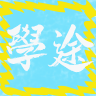
<style>
.page{position:relative;width:96px;height:96px}
.page>*{position:absolute;margin:0}
.t1{font:51.6px "HBJGTPFT--GB1-0";letter-spacing:0.06em;color:#f5f8f9}
.t2{font:52.7px "HBJGTPFT--GB1-0";letter-spacing:0.06em;color:#f6f8f9}
</style>
<div class="page">
<p class="t1" style="left:6px;top:24px;width:42px;height:48px">学</p>
<p class="t2" style="left:47px;top:24px;width:48px;height:49px">途</p>
</div>
